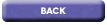
<style>
.page{position:relative;width:107px;height:25px}
.page>*{position:absolute;margin:0}
.t1{font:9px "Novecentowide-Bold";color:#ffffff}
</style>
<div class="page">
<p class="t1" style="left:41px;top:7px;width:25px;height:7px">BACK</p>
</div>
